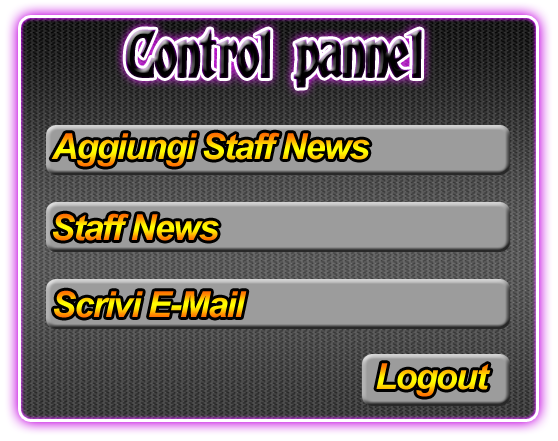
<style>
.page{position:relative;width:558px;height:441px}
.page>*{position:absolute;margin:0}
.t1{font:60px "AlbertText-Bold";letter-spacing:-0.05em}
.t2{font:36px "Arial-BoldItalicMT";letter-spacing:-0.05em}
</style>
<div class="page">
<p class="t1" style="left:125px;top:29px;width:297px;height:59px">Control pannel</p>
<p class="t2" style="left:51px;top:132px;width:319px;height:35px">Aggiungi Staff News</p>
<p class="t2" style="left:53px;top:213px;width:166px;height:28px">Staff News</p>
<p class="t2" style="left:54px;top:290px;width:193px;height:28px">Scrivi E-Mail</p>
<p class="t2" style="left:376px;top:363px;width:115px;height:34px">Logout</p>
</div>
